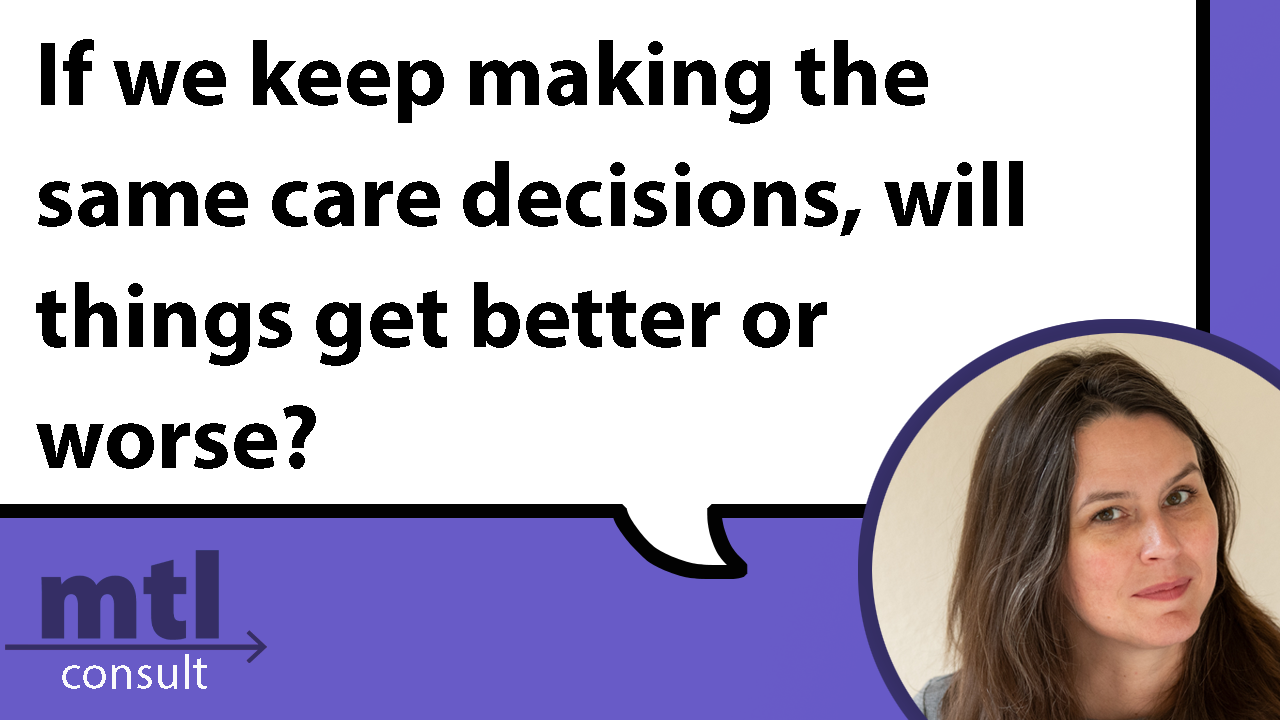
<style>
.page{position:relative;width:1280px;height:720px;background:#ffffff}
.page>*{position:absolute;margin:0}
.t1{font:91.7px "MyriadPro-Bold";color:#000000}
</style>
<div class="page">
<p class="t1" style="left:36px;top:39px;width:987px;height:430px">If we keep making the<br>same care decisions, will<br>things get better or<br>worse?</p>
</div>
